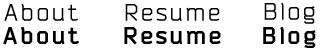
<style>
.page{position:relative;width:320px;height:48px;background:#ffffff}
.page>*{position:absolute;margin:0}
.t1{font:24px "Bender";letter-spacing:0.1em;color:#000000}
.t2{font:24px "Bender-Bold";letter-spacing:0.1em;color:#000000}
</style>
<div class="page">
<p class="t1" style="left:4px;top:3px;width:74px;height:18px">About</p>
<p class="t1" style="left:125px;top:4px;width:95px;height:17px">Resume</p>
<p class="t1" style="left:264px;top:2px;width:51px;height:22px">Blog</p>
<p class="t2" style="left:3px;top:26px;width:76px;height:19px">About</p>
<p class="t2" style="left:124px;top:27px;width:97px;height:18px">Resume</p>
<p class="t2" style="left:263px;top:26px;width:53px;height:22px">Blog</p>
</div>
